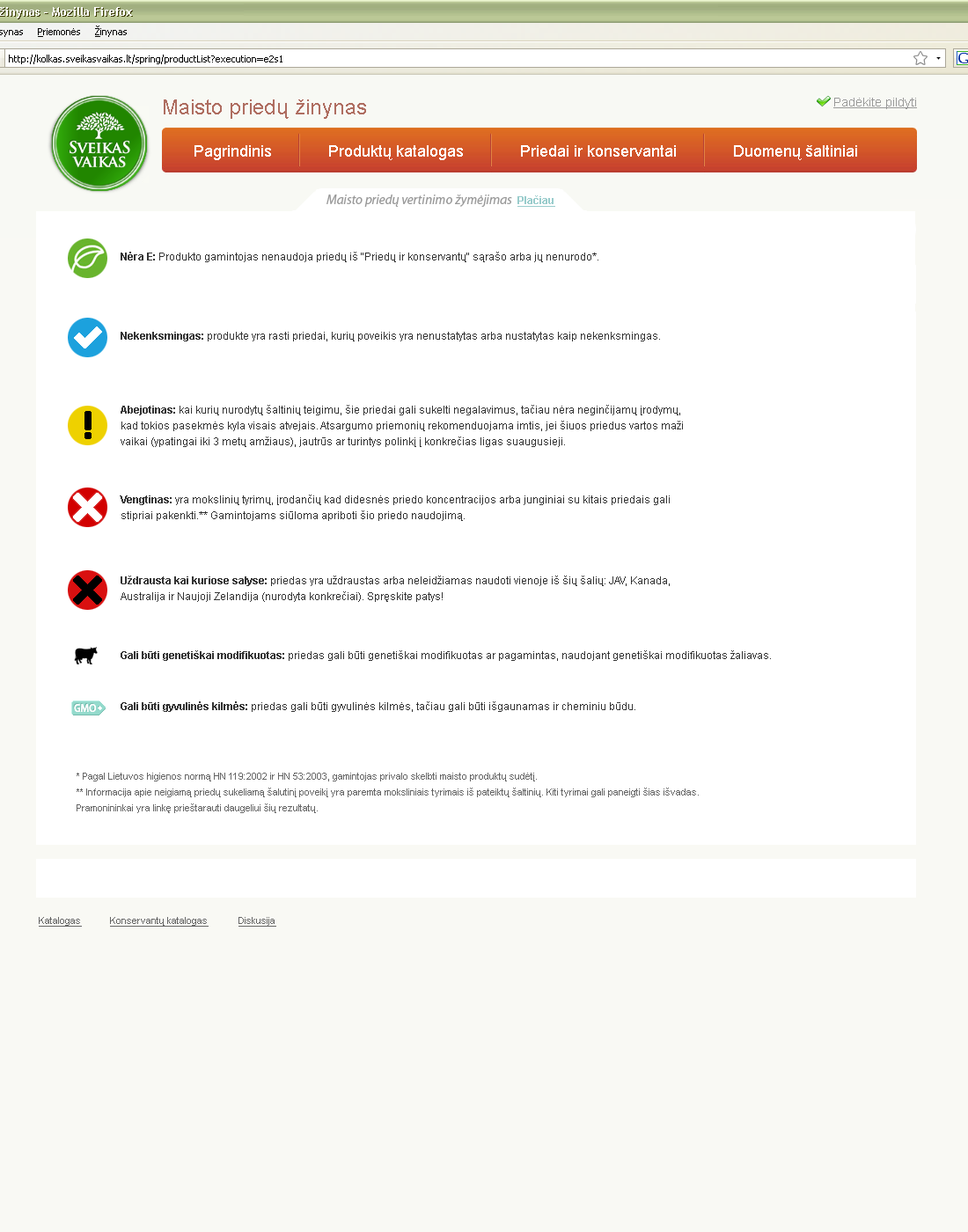
<style>
.page{position:relative;width:968px;height:1232px;background:#ffffff}
.page>*{position:absolute;margin:0}
.t1{font:13.2px "MyriadPro-It";color:#999999}
.t2{font:10.6px "Arial-BoldMT";color:#99cccc;text-decoration:underline}
.t3{font:10.6px "ArialMT";color:#333333}
.t4{font:10.6px "Arial-BoldMT";color:#333333}
.t5{font:10.6px/15.8px "ArialMT";color:#333333}
.t6{font:10.6px/15.8px "Arial-BoldMT";color:#333333}
.t7{font:9.7px/15.8px "ArialMT";color:#666666}
.t8{font:9.7px "ArialMT";color:#666666;text-decoration:underline}
</style>
<div class="page">
<p class="t1" style="left:326px;top:194px;width:186px;height:13px">Maisto priedų vertinimo žymėjimas</p>
<p class="t2" style="left:517px;top:195px;width:38px;height:12px">Plačiau</p>
<p class="t3" style="left:121px;top:252px;width:477px;height:10px"><span class="t4">Nėra E:</span> Produkto gamintojas nenaudoja priedų iš “Priedų ir konservantų“ sąrašo arba jų nenurodo*.</p>
<p class="t3" style="left:121px;top:332px;width:539px;height:9px"><span class="t4">Nekenksmingas: </span>produkte yra rasti priedai, kurių poveikis yra nenustatytas arba nustatytas kaip nekenksmingas.</p>
<p class="t5" style="left:121px;top:405px;width:562px;height:42px"><span class="t6">Abejotinas: </span>kai kurių nurodytų šaltinių teigimu, šie priedai gali sukelti negalavimus, tačiau nėra neginčijamų įrodymų, <br>kad tokios pasekmės kyla visais atvejais. Atsargumo priemonių rekomenduojama imtis, jei šiuos priedus vartos maži <br>vaikai (ypatingai iki 3 metų amžiaus), jautrūs ar turintys polinkį į konkrečias ligas suaugusieji.</p>
<p class="t5" style="left:120px;top:495px;width:550px;height:26px"><span class="t6">Vengtinas: </span>yra mokslinių tyrimų, įrodančių kad didesnės priedo koncentracijos arba junginiai su kitais priedais gali <br>stipriai pakenkti.** Gamintojams siūloma apriboti šio priedo naudojimą.</p>
<p class="t5" style="left:121px;top:575px;width:549px;height:27px"><span class="t6">Uždrausta kai kuriose salyse: </span>priedas yra uždraustas arba neleidžiamas naudoti vienoje iš šių šalių: JAV, Kanada, <br>Australija ir Naujoji Zelandija (nurodyta konkrečiai). Spręskite patys!</p>
<p class="t3" style="left:121px;top:650px;width:650px;height:11px"><span class="t4">Gali būti genetiškai modifikuotas: </span>priedas gali būti genetiškai modifikuotas ar pagamintas, naudojant genetiškai modifikuotas žaliavas.</p>
<p class="t3" style="left:121px;top:701px;width:514px;height:11px"><span class="t4">Gali būti gyvulinės kilmės: </span>priedas gali būti gyvulinės kilmės, tačiau gali būti išgaunamas ir cheminiu būdu.</p>
<p class="t7" style="left:77px;top:773px;width:622px;height:40px">* Pagal Lietuvos higienos normą HN 119:2002 ir HN 53:2003, gamintojas privalo skelbti maisto produktų sudėtį.<br>** Informacija apie neigiamą priedų sukeliamą šalutinį poveikį yra paremta moksliniais tyrimais iš pateiktų šaltinių. Kiti tyrimai gali paneigti šias išvadas. <br>Pramonininkai yra linkę prieštarauti daugeliui šių rezultatų.</p>
<p class="t8" style="left:39px;top:917px;width:43px;height:10px">Katalogas</p>
<p class="t8" style="left:110px;top:917px;width:99px;height:10px">Konservantų katalogas</p>
<p class="t8" style="left:238px;top:917px;width:38px;height:10px">Diskusija</p>
</div>
